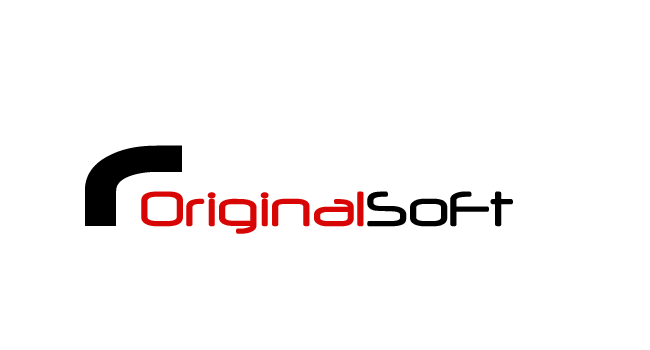
<style>
.page{position:relative;width:650px;height:350px;background:#ffffff}
.page>*{position:absolute;margin:0}
.t1{font:58.3px "Neuropol";color:#d70504}
.t2{font:58.3px "Stentiga";color:#d70504}
.t3{font:58.3px "Neuropol";color:#000000}
</style>
<div class="page">
<p class="t1" style="left:141px;top:191px;width:372px;height:43px"><span class="t2">               </span>Original<span class="t3">SoFt</span></p>
</div>
